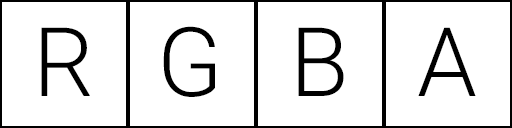
<style>
.page{position:relative;width:512px;height:128px;background:#ffffff}
.page>*{position:absolute;margin:0}
.t1{font:96px "Roboto-Light";letter-spacing:-0.02em;color:#000000}
</style>
<div class="page">
<p class="t1" style="left:41px;top:27px;width:49px;height:69px">R</p>
<p class="t1" style="left:163px;top:26px;width:52px;height:71px">G</p>
<p class="t1" style="left:298px;top:27px;width:46px;height:69px">B</p>
<p class="t1" style="left:418px;top:27px;width:58px;height:69px">A</p>
</div>
